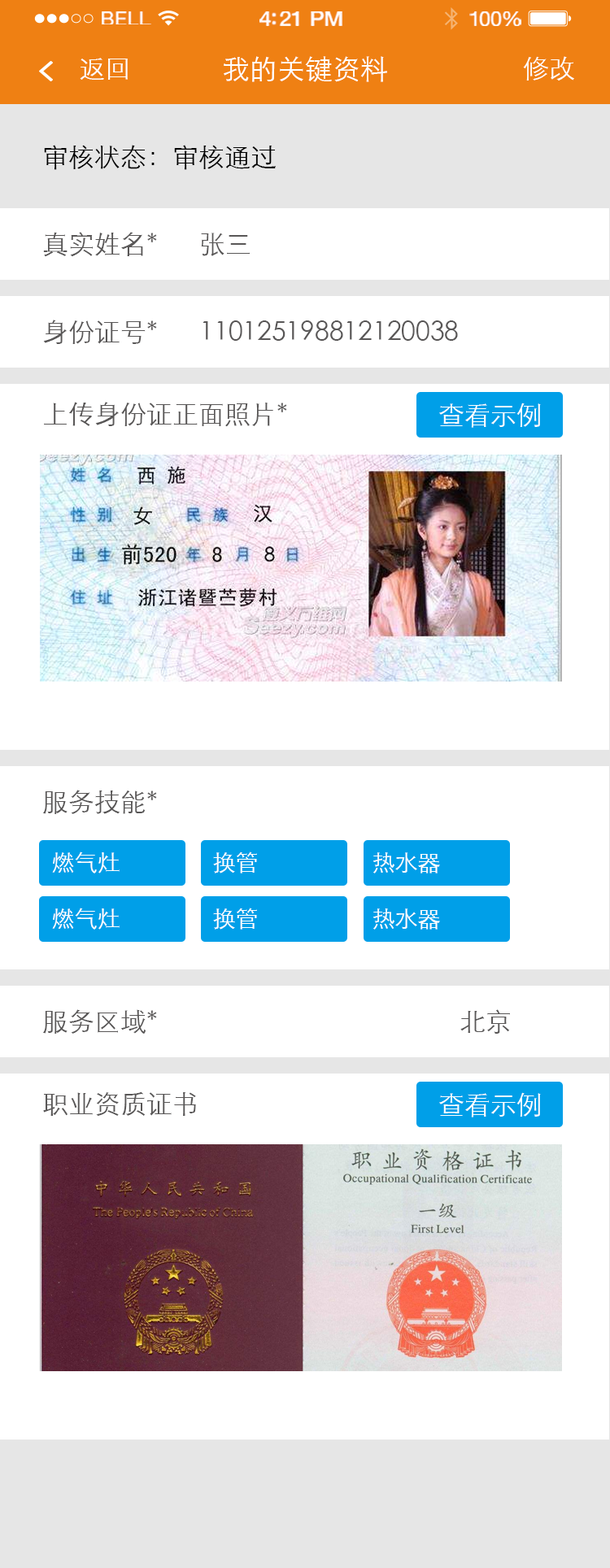
<style>
.page{position:relative;width:610px;height:1568px;background:#ffffff}
.page>*{position:absolute;margin:0}
.t1{font:18.9px "HelveticaNeue";letter-spacing:0.02em;color:#ffffff;scale:1.06 1}
.t2{font:20.6px "HelveticaNeue-Medium";letter-spacing:-0.02em;color:#ffffff;scale:1.06 1}
.t3{font:19.7px "HelveticaNeue";letter-spacing:-0.02em;color:#ffffff;scale:1.06 1}
.t4{font:26px "STXihei";color:#ffffff}
.t5{font:27.7px "STXihei";color:#ffffff}
.t6{font:26px "STXihei";color:#000000}
.t7{font:26px "STXihei";color:#595757}
.t8{font:22.8px "STXihei";color:#ffffff}
</style>
<div class="page">
<p class="t1" style="left:102px;top:11px;width:49px;height:13px">BELL</p>
<p class="t2" style="left:259px;top:11px;width:83px;height:15px">4:21 PM</p>
<p class="t3" style="left:469px;top:11px;width:52px;height:15px">100%</p>
<p class="t4" style="left:80px;top:58px;width:48px;height:22px">返回</p>
<p class="t5" style="left:224px;top:56px;width:163px;height:26px">我的关键资料</p>
<p class="t4" style="left:523px;top:56px;width:51px;height:25px">修改</p>
<p class="t6" style="left:44px;top:145px;width:232px;height:25px">审核状态：审核通过</p>
<p class="t7" style="left:43px;top:232px;width:114px;height:25px">真实姓名*</p>
<p class="t7" style="left:201px;top:233px;width:49px;height:23px">张三</p>
<p class="t7" style="left:43px;top:320px;width:114px;height:24px">身份证号*</p>
<p class="t7" style="left:203px;top:320px;width:255px;height:21px">110125198812120038</p>
<p class="t7" style="left:44px;top:402px;width:243px;height:25px">上传身份证正面照片*</p>
<p class="t4" style="left:439px;top:403px;width:102px;height:25px">查看示例</p>
<p class="t7" style="left:43px;top:790px;width:114px;height:24px">服务技能*</p>
<p class="t8" style="left:52px;top:852px;width:68px;height:21px">燃气灶</p>
<p class="t8" style="left:213px;top:852px;width:44px;height:21px">换管</p>
<p class="t8" style="left:373px;top:852px;width:67px;height:21px">热水器</p>
<p class="t8" style="left:52px;top:908px;width:68px;height:22px">燃气灶</p>
<p class="t8" style="left:213px;top:908px;width:44px;height:22px">换管</p>
<p class="t8" style="left:373px;top:908px;width:67px;height:22px">热水器</p>
<p class="t7" style="left:43px;top:1009px;width:114px;height:25px">服务区域*</p>
<p class="t7" style="left:460px;top:1009px;width:50px;height:25px">北京</p>
<p class="t7" style="left:43px;top:1091px;width:153px;height:25px">职业资质证书</p>
<p class="t4" style="left:439px;top:1092px;width:102px;height:25px">查看示例</p>
</div>
